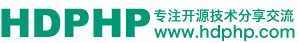
<style>
.page{position:relative;width:299px;height:43px;background:#ffffff}
.page>*{position:absolute;margin:0}
.t1{font:29.6px "Arial-Black";color:#019875}
.t2{font:10.6px "HiraginoSansGB-W6";color:#019875}
.t3{font:12px "HiraginoSansGB-W6";color:#019875}
</style>
<div class="page">
<p class="t1" style="left:1px;top:8px;width:149px;height:29px">HDPHP</p>
<p class="t2" style="left:154px;top:8px;width:140px;height:15px">专注开源技术分享交流</p>
<p class="t3" style="left:154px;top:25px;width:141px;height:16px">www.hdphp.com</p>
</div>
